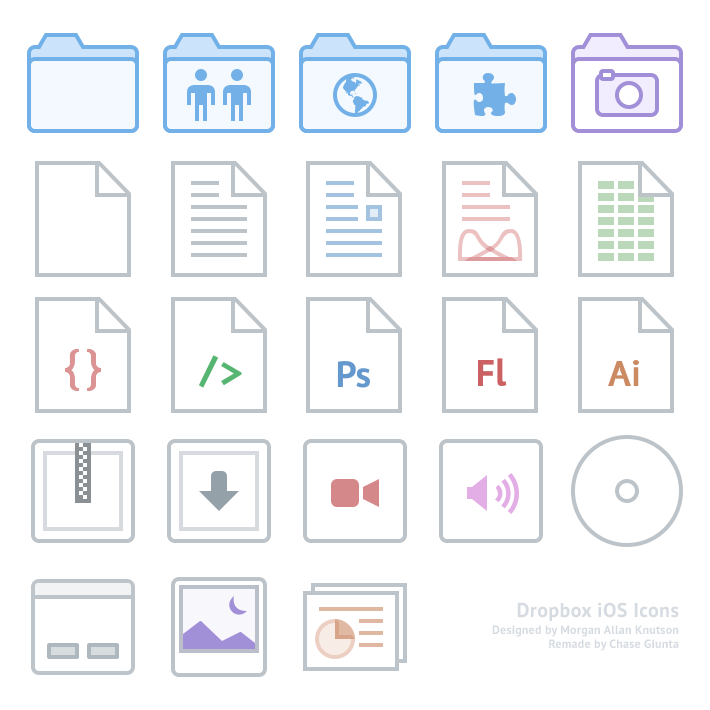
<style>
.page{position:relative;width:710px;height:710px;background:#ffffff}
.page>*{position:absolute;margin:0}
.t1{font:20px "PTSans-Bold";letter-spacing:0.02em;color:#d5dbe0}
.t2{font:12px "PTSans-Bold";letter-spacing:0.02em;color:#d5dbe0}
</style>
<div class="page">
<p class="t1" style="left:517px;top:602px;width:162px;height:19px">Dropbox iOS Icons</p>
<p class="t2" style="left:492px;top:625px;width:187px;height:26px;text-align:right">Designed by Morgan Allan Knutson<br>Remade by Chase Giunta</p>
</div>
